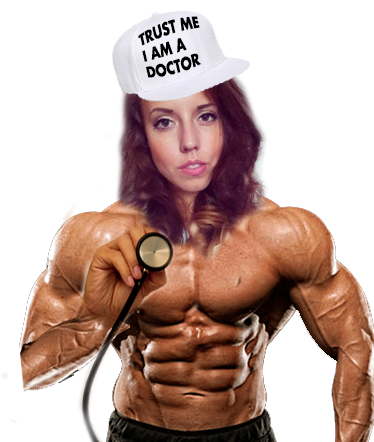
<style>
.page{position:relative;width:374px;height:442px;background:#ffffff}
.page>*{position:absolute;margin:0}
.t1{font:14.1px/16px "FuturaLT-Bold";color:#010000;text-transform:uppercase;scale:0.88 1}
</style>
<div class="page">
<p class="t1" style="left:138px;top:16px;width:63px;height:62px;rotate:-17deg">TRUST ME <br>I AM A<br>DOCTOR</p>
</div>
